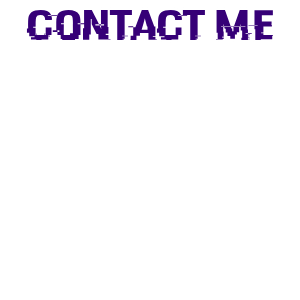
<style>
.page{position:relative;width:300px;height:300px;background:#ffffff}
.page>*{position:absolute;margin:0}
.t1{font:42.9px "HACKED";color:#360077;scale:1.25 1}
</style>
<div class="page">
<p class="t1" style="left:26px;top:9px;width:247px;height:31px">Contact Me</p>
</div>
